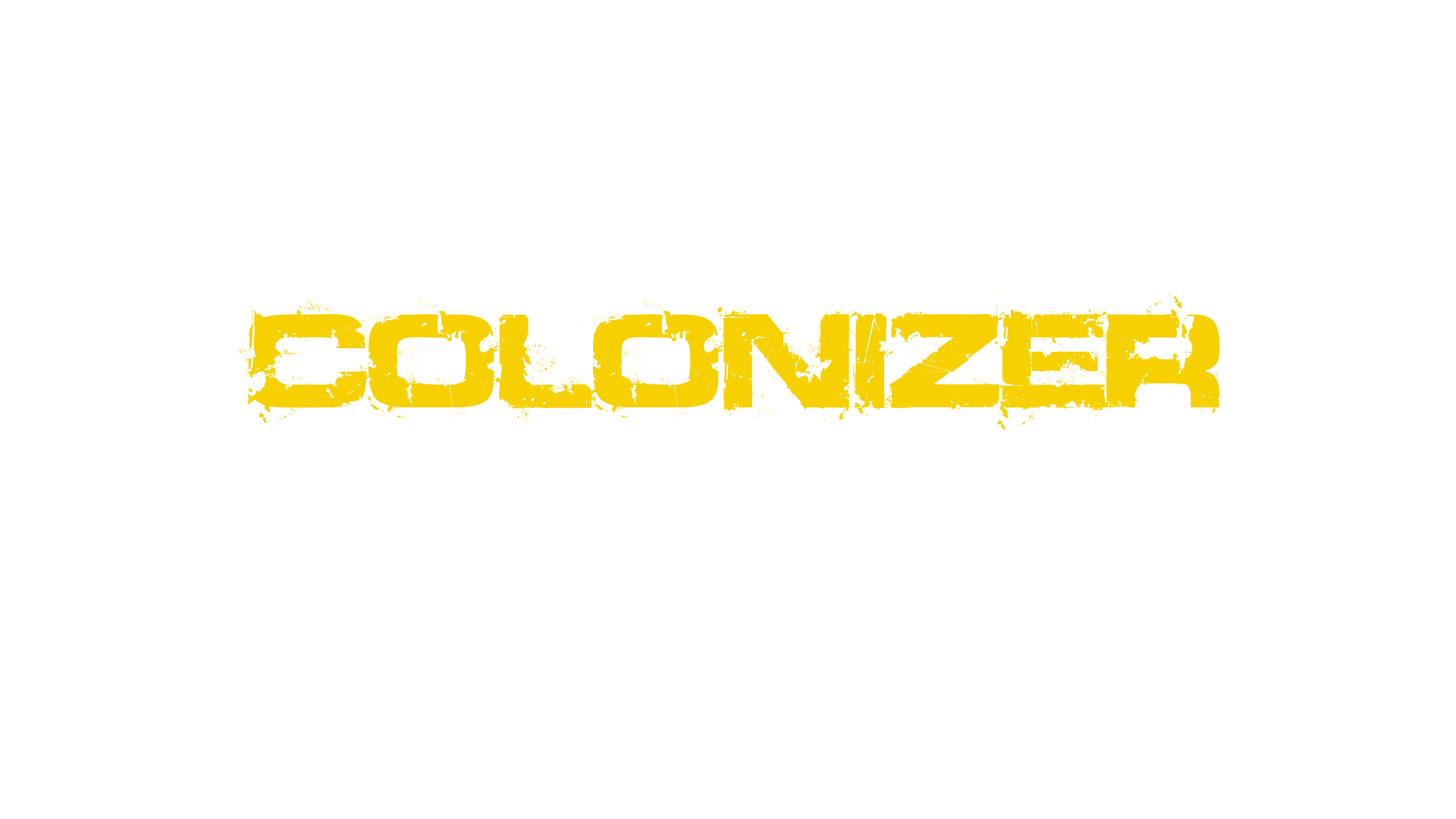
<style>
.page{position:relative;width:1456px;height:819px;background:#ffffff}
.page>*{position:absolute;margin:0}
.t1{font:136.5px "Defused-ExtendedBold";color:#f6d000}
</style>
<div class="page">
<p class="t1" style="left:239px;top:289px;width:981px;height:143px">COLONIZER</p>
</div>
